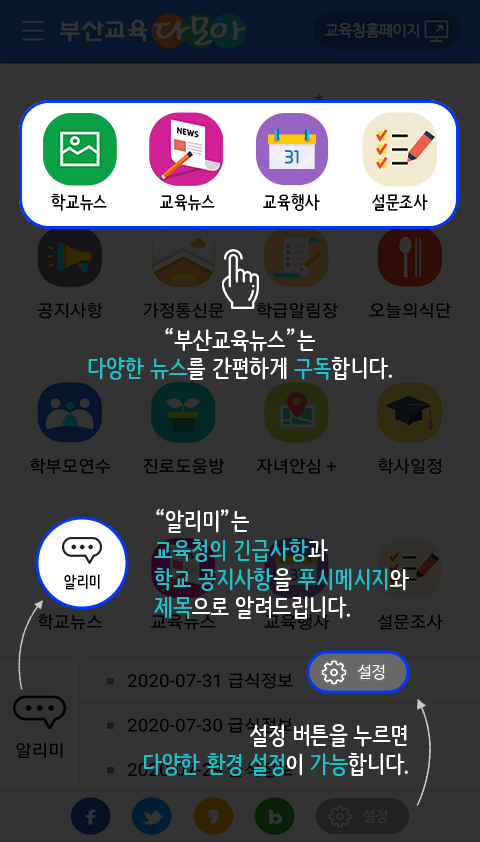
<style>
.page{position:relative;width:480px;height:842px;background:#333333}
.page>*{position:absolute;margin:0}
.t1{font:18px "NanumBarunpen-Bold";color:#000000}
.t2{font:24px "NanumBarunpen-Bold";color:#ffffff}
.t3{font:24px "NanumBarunpen-Bold";color:#1ec1ca}
.t4{font:16.1px "NanumBarunpen-Bold";color:#000000}
</style>
<div class="page">
<p class="t1" style="left:51px;top:193px;width:377px;height:18px">학교뉴스           교육뉴스          교육행사           설문조사</p>
<p class="t2" style="left:88px;top:328px;width:304px;height:52px;text-align:center">“부산교육뉴스”는<br><span class="t3">다양한 뉴스</span>를 간편하게 <span class="t3">구독</span>합니다.</p>
<p class="t2" style="left:154px;top:509px;width:255px;height:110px">“알리미”는<br><span class="t3">교육청의 긴급사항</span>과<br><span class="t3">학교 공지사항</span>을 <span class="t3">푸시메시지</span>와<br><span class="t3">제목</span>으로 알려드립니다.</p>
<p class="t4" style="left:64px;top:574px;width:36px;height:16px">알리미</p>
<p class="t2" style="left:144px;top:724px;width:264px;height:52px;text-align:right">설정 버튼을 누르면<br><span class="t3">다양한 환경 설정</span>이 <span class="t3">가능</span>합니다.</p>
</div>
